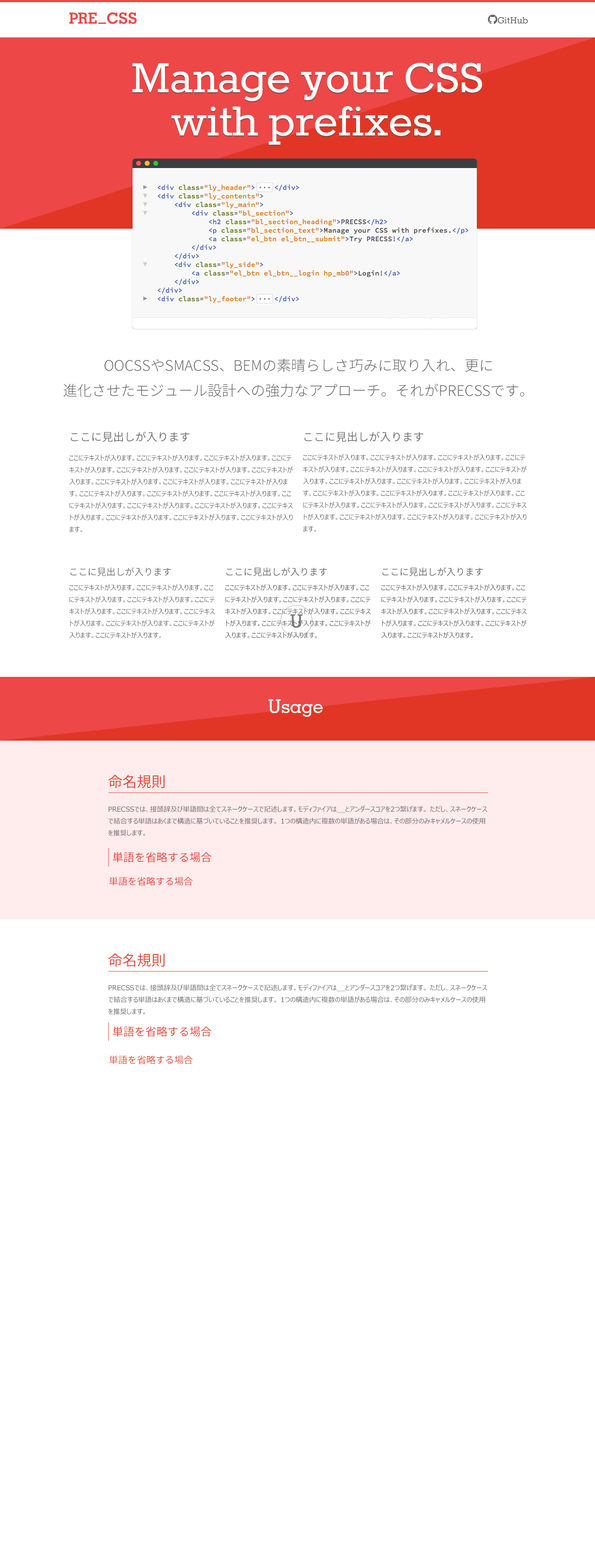
<style>
.page{position:relative;width:595px;height:1568px;background:#ffffff}
.page>*{position:absolute;margin:0}
.t1{font:15.3px "GeometricSlab703BT-Bold";color:#ed4747}
.t2{font:51px/43.3px "Rokkitt-Regular";color:#ffffff}
.t3{font:14.5px "NotoSansCJKjp-Light";color:#666666}
.t4{font:11.1px "NotoSansCJKjp-DemiLight";color:#666666}
.t5{font:6.8px "MeiryoUI";color:#666666}
.t6{font:9.4px "NotoSansCJKjp-DemiLight";color:#666666}
.t7{font:18.2px "GeometricSlab703BT-Medium";color:#797979}
.t8{font:18.7px "GeometricSlab703BT-Medium";color:#ffffff}
.t9{font:14.5px "NotoSansCJKjp-DemiLight";color:#e13626}
.t10{font:11.1px "NotoSansCJKjp-DemiLight";color:#e13626}
.t11{font:9.4px "NotoSansCJKjp-DemiLight";color:#e13626}
</style>
<div class="page">
<p class="t1" style="left:69px;top:12px;width:68px;height:12px">PRE_CSS</p>
<p class="t2" style="left:132px;top:62px;width:351px;height:83px;text-align:center">Manage your CSS<br>with prefixes.</p>
<p class="t3" style="left:63px;top:358px;width:462px;height:39px;text-align:center">OOCSSやSMACSS、BEMの素晴らしさ巧みに取り入れ、更に<br>進化させたモジュール設計への強力なアプローチ。それがPRECSSです。</p>
<p class="t4" style="left:71px;top:432px;width:119px;height:10px">ここに見出しが入ります</p>
<p class="t4" style="left:304px;top:432px;width:119px;height:10px">ここに見出しが入ります</p>
<p class="t5" style="left:69px;top:454px;width:224px;height:78px">ここにテキストが入ります。ここにテキストが入ります。ここにテキストが入ります。ここにテキストが入ります。ここにテキストが入ります。ここにテキストが入ります。ここにテキストが入ります。ここにテキストが入ります。ここにテキストが入ります。ここにテキストが入ります。ここにテキストが入ります。ここにテキストが入ります。ここにテキストが入ります。ここにテキストが入ります。ここにテキストが入ります。ここにテキストが入ります。ここにテキストが入ります。ここにテキストが入ります。ここにテキストが入ります。ここにテキストが入ります。</p>
<p class="t5" style="left:303px;top:454px;width:224px;height:78px">ここにテキストが入ります。ここにテキストが入ります。ここにテキストが入ります。ここにテキストが入ります。ここにテキストが入ります。ここにテキストが入ります。ここにテキストが入ります。ここにテキストが入ります。ここにテキストが入ります。ここにテキストが入ります。ここにテキストが入ります。ここにテキストが入ります。ここにテキストが入ります。ここにテキストが入ります。ここにテキストが入ります。ここにテキストが入ります。ここにテキストが入ります。ここにテキストが入ります。ここにテキストが入ります。ここにテキストが入ります。</p>
<p class="t6" style="left:71px;top:567px;width:100px;height:9px">ここに見出しが入ります</p>
<p class="t6" style="left:227px;top:567px;width:100px;height:9px">ここに見出しが入ります</p>
<p class="t6" style="left:383px;top:567px;width:100px;height:9px">ここに見出しが入ります</p>
<p class="t5" style="left:69px;top:584px;width:146px;height:54px">ここにテキストが入ります。ここにテキストが入ります。ここにテキストが入ります。ここにテキストが入ります。ここにテキストが入ります。ここにテキストが入ります。ここにテキストが入ります。ここにテキストが入ります。ここにテキストが入ります。ここにテキストが入ります。</p>
<p class="t5" style="left:225px;top:584px;width:146px;height:54px">ここにテキストが入ります。ここにテキストが入ります。ここにテキストが入ります。ここにテキストが入ります。ここにテキストが入ります。ここにテキストが入ります。ここにテキストが入ります。ここにテキストが入ります。ここにテキストが入ります。ここにテキストが入ります。</p>
<p class="t5" style="left:381px;top:584px;width:146px;height:54px">ここにテキストが入ります。ここにテキストが入ります。ここにテキストが入ります。ここにテキストが入ります。ここにテキストが入ります。ここにテキストが入ります。ここにテキストが入ります。ここにテキストが入ります。ここにテキストが入ります。ここにテキストが入ります。</p>
<p class="t7" style="left:290px;top:614px;width:13px;height:14px">U</p>
<p class="t8" style="left:268px;top:699px;width:55px;height:18px">Usage</p>
<p class="t9" style="left:108px;top:775px;width:57px;height:13px">命名規則</p>
<p class="t5" style="left:108px;top:805px;width:380px;height:31px">PRECSSでは、接頭辞及び単語間は全てスネークケースで記述します。モディファイアは__とアンダースコアを2つ繋げます。 ただし、スネークケースで結合する単語はあくまで構造に基づいていることを推奨します。 1つの構造内に複数の単語がある場合は、その部分のみキャメルケースの使用を推奨します。</p>
<p class="t10" style="left:113px;top:852px;width:99px;height:11px">単語を省略する場合</p>
<p class="t11" style="left:109px;top:877px;width:84px;height:9px">単語を省略する場合</p>
<p class="t9" style="left:108px;top:953px;width:57px;height:14px">命名規則</p>
<p class="t5" style="left:108px;top:984px;width:380px;height:30px">PRECSSでは、接頭辞及び単語間は全てスネークケースで記述します。モディファイアは__とアンダースコアを2つ繋げます。 ただし、スネークケースで結合する単語はあくまで構造に基づいていることを推奨します。 1つの構造内に複数の単語がある場合は、その部分のみキャメルケースの使用を推奨します。</p>
<p class="t10" style="left:113px;top:1026px;width:99px;height:11px">単語を省略する場合</p>
<p class="t11" style="left:109px;top:1055px;width:84px;height:9px">単語を省略する場合</p>
</div>
